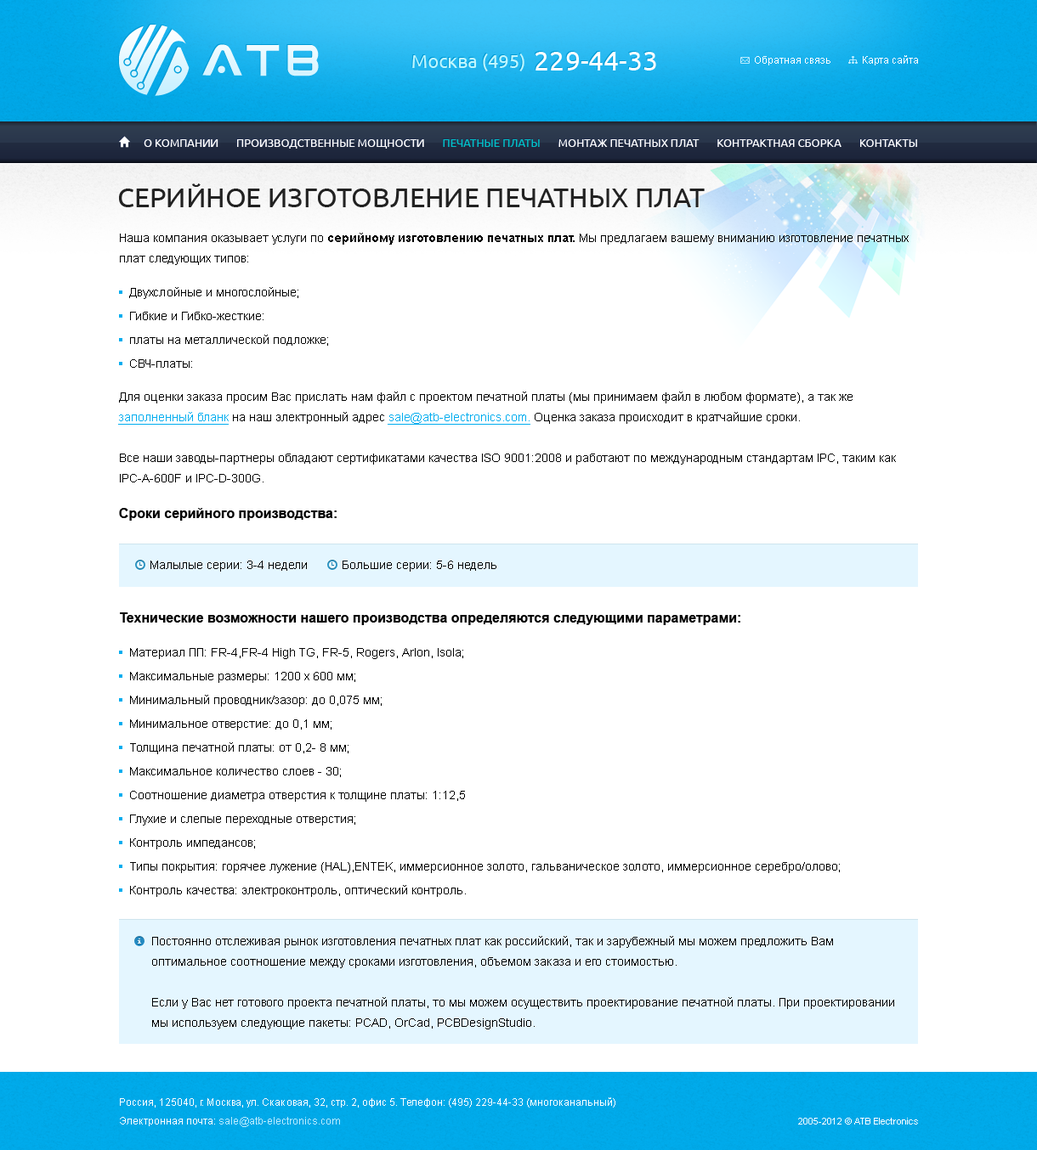
<style>
.page{position:relative;width:1037px;height:1150px;background:#ffffff}
.page>*{position:absolute;margin:0}
.t1{font:18.7px "Ubuntu";color:#c0f7ff}
.t2{font:27.2px "Ubuntu";color:#ffffff}
.t3{font:10.2px "ArialMT";color:#ffffff}
.t4{font:11px "Ubuntu";color:#ffffff;text-transform:uppercase}
.t5{font:11px "Ubuntu";color:#00c1c8;text-transform:uppercase}
.t6{font:27.2px "Ubuntu";color:#222222;text-transform:uppercase}
.t7{font:11.9px/20.4px "ArialMT";color:#000000}
.t8{font:11.9px/20.4px "Arial-BoldMT";color:#000000}
.t9{font:11.9px/23.8px "ArialMT";color:#000000}
.t10{font:11.9px/20.4px "ArialMT";color:#00adef;text-decoration:underline}
.t11{font:13.6px "Arial-BoldMT";color:#000000}
.t12{font:11.9px "ArialMT";color:#000000}
.t13{font:10.2px/18.7px "ArialMT";color:#ffffff}
.t14{font:10.2px/18.7px "ArialMT";color:#b9ecff}
.t15{font:9.3px "ArialMT";color:#ffffff}
</style>
<div class="page">
<p class="t1" style="left:412px;top:52px;width:244px;height:19px">Москва (495)  <span class="t2">229-44-33</span></p>
<p class="t3" style="left:754px;top:55px;width:164px;height:10px">Обратная связь            Карта сайта</p>
<p class="t4" style="left:144px;top:139px;width:773px;height:10px">О Компании       Производственные мощности    <span class="t5">   Печатные платы       </span>Монтаж печатных плат       Контрактная сборка       Контакты</p>
<p class="t6" style="left:119px;top:184px;width:585px;height:23px">Серийное изготовление печатных плат</p>
<p class="t7" style="left:120px;top:233px;width:788px;height:32px">Наша компания оказывает услуги по <span class="t8">серийному изготовлению печатных плат.</span> Мы предлагаем вашему вниманию изготовление печатных плат следующих типов:</p>
<p class="t9" style="left:129px;top:287px;width:199px;height:81px">Двухслойные и многослойные;<br>Гибкие и Гибко-жесткие:<br>платы на металлической подложке;<br>СВЧ-платы:</p>
<p class="t7" style="left:118px;top:392px;width:778px;height:91px">Для оценки заказа просим Вас прислать нам файл с проектом печатной платы (мы принимаем файл в любом формате), а так же <span class="t10">заполненный бланк</span> на наш электронный адрес <span class="t10">sale@atb-electronics.com.</span> Оценка заказа происходит в кратчайшие сроки.<br><br>Все наши заводы-партнеры обладают сертификатами качества ISO 9001:2008 и работают по международным стандартам IPC, таким как IPC-A-600F и IPC-D-300G.</p>
<p class="t11" style="left:119px;top:508px;width:217px;height:13px">Сроки серийного производства:</p>
<p class="t12" style="left:150px;top:561px;width:346px;height:11px">Малылые серии: 3-4 недели          Большие серии: 5-6 недель</p>
<p class="t11" style="left:120px;top:613px;width:620px;height:12px">Технические возможности нашего производства определяются следующими параметрами:</p>
<p class="t9" style="left:130px;top:648px;width:709px;height:249px">Материал ПП: FR-4,FR-4 High TG, FR-5, Rogers, Arlon, Isola;<br>Максимальные размеры: 1200 х 600 мм;<br>Минимальный проводник/зазор: до 0,075 мм;<br>Минимальное отверстие: до 0,1 мм;<br>Толщина печатной платы: от 0,2- 8 мм;<br>Максимальное количество слоев - 30;<br>Соотношение диаметра отверстия к толщине платы: 1:12,5<br>Глухие и слепые переходные отверстия;<br>Контроль импедансов;<br>Типы покрытия: горячее лужение (HAL),ENTEK, иммерсионное золото, гальваническое золото, иммерсионное серебро/олово;<br>Контроль качества: электроконтроль, оптический контроль.</p>
<p class="t7" style="left:152px;top:936px;width:742px;height:94px">Постоянно отслеживая рынок изготовления печатных плат как российский, так и зарубежный мы можем предложить Вам оптимальное соотношение между сроками изготовления, объемом заказа и его стоимостью.<br><br>Если у Вас нет готового проекта печатной платы, то мы можем осуществить проектирование печатной платы. При проектировании мы используем следующие пакеты: PCAD, OrCad, PCBDesignStudio.</p>
<p class="t13" style="left:120px;top:1098px;width:495px;height:29px">Россия, 125040, г. Москва, ул. Скаковая, 32, стр. 2, офис 5. Телефон: (495) 229-44-33 (многоканальный)<br>Электронная почта: <span class="t14">sale@atb-electronics.com</span></p>
<p class="t15" style="left:798px;top:1118px;width:120px;height:7px">2005-2012 © ATB Electronics</p>
</div>
